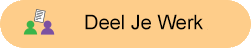
<style>
.page{position:relative;width:251px;height:48px;background:#fecd8a}
.page>*{position:absolute;margin:0}
.t1{font:19.9px "ArialMT";color:#000000}
</style>
<div class="page">
<p class="t1" style="left:85px;top:14px;width:118px;height:16px">Deel Je Werk</p>
</div>
